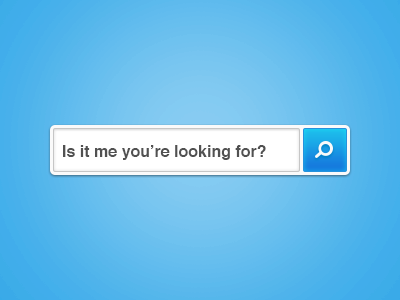
<style>
.page{position:relative;width:400px;height:300px}
.page>*{position:absolute;margin:0}
.t1{font:16px "Helvetica-Bold";color:#515151}
</style>
<div class="page">
<p class="t1" style="left:63px;top:145px;width:203px;height:15px">Is it me you’re looking for?</p>
</div>
